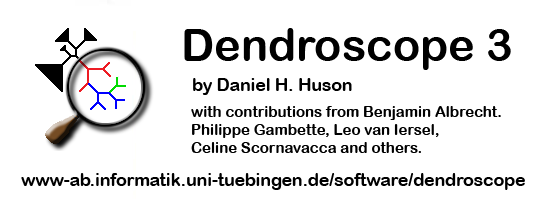
<style>
.page{position:relative;width:543px;height:199px;background:#ffffff}
.page>*{position:absolute;margin:0}
.t1{font:45px "ArialRoundedMTBold";color:#000000}
.t2{font:17.5px "ArialRoundedMTBold";color:#000000}
.t3{font:15px "ArialRoundedMTBold";color:#000000}
</style>
<div class="page">
<p class="t1" style="left:184px;top:28px;width:327px;height:42px">Dendroscope 3</p>
<p class="t2" style="left:193px;top:78px;width:159px;height:17px">by Daniel H. Huson</p>
<p class="t3" style="left:191px;top:106px;width:310px;height:47px">with contributions from Benjamin Albrecht.<br>Philippe Gambette, Leo van Iersel,<br>Celine Scornavacca and others.</p>
<p class="t2" style="left:21px;top:173px;width:504px;height:17px">www-ab.informatik.uni-tuebingen.de/software/dendroscope</p>
</div>
